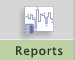
<style>
.page{position:relative;width:75px;height:60px;background:#d6d6d6}
.page>*{position:absolute;margin:0}
.t1{font:12px "LucidaSansUnicode";letter-spacing:0.05em;color:#2c392f}
</style>
<div class="page">
<p class="t1" style="left:16px;top:46px;width:47px;height:12px">Reports</p>
</div>
